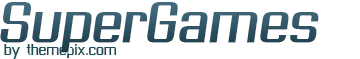
<style>
.page{position:relative;width:360px;height:59px;background:#ffffff}
.page>*{position:absolute;margin:0}
.t1{font:45px "AsseenonTVSkew";color:#315565;font-weight:bold}
.t2{font:12px "AsseenonTV";color:#1d4d52}
</style>
<div class="page">
<p class="t1" style="left:0px;top:2px;width:319px;height:51px">SuperGames</p>
<p class="t2" style="left:4px;top:44px;width:113px;height:15px">by themepix.com</p>
</div>
